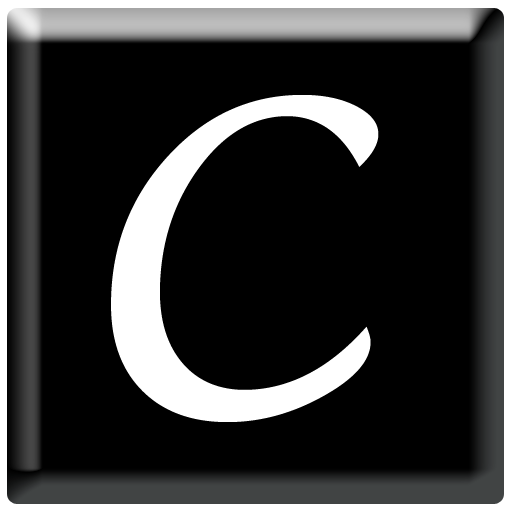
<style>
.page{position:relative;width:512px;height:512px;background:#000000}
.page>*{position:absolute;margin:0}
.t1{font:431px "LucidaHandwriting-Italic";color:#ffffff}
</style>
<div class="page">
<p class="t1" style="left:111px;top:95px;width:268px;height:327px">C</p>
</div>
